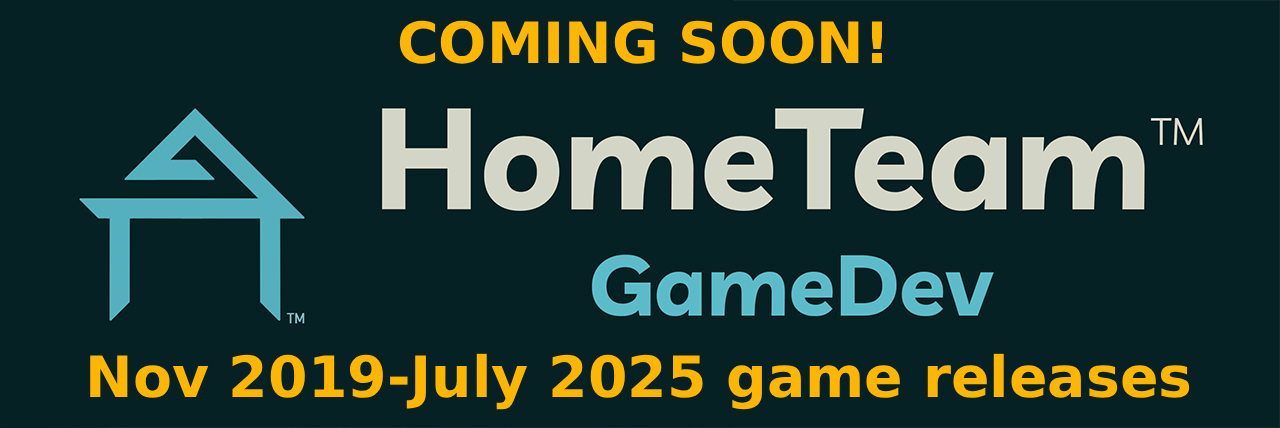
<style>
.page{position:relative;width:1280px;height:428px;background:#062123}
.page>*{position:absolute;margin:0}
.t1{font:56.8px "DejaVuSans-Bold";color:#ffb600}
</style>
<div class="page">
<p class="t1" style="left:399px;top:20px;width:483px;height:44px">COMING SOON!</p>
<p class="t1" style="left:90px;top:353px;width:1100px;height:57px">Nov 2019-July 2025 game releases</p>
</div>
